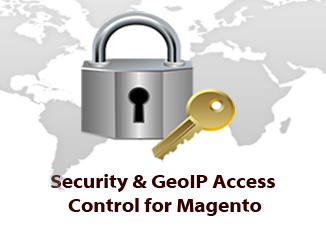
<style>
.page{position:relative;width:326px;height:226px;background:#ffffff}
.page>*{position:absolute;margin:0}
.t1{font:20.2px "MyriadWebPro-Bold";color:#330000;scale:1.03 1}
</style>
<div class="page">
<p class="t1" style="left:51px;top:174px;width:224px;height:42px;text-align:center">Security &amp; GeoIP Access <br>Control for Magento</p>
</div>
